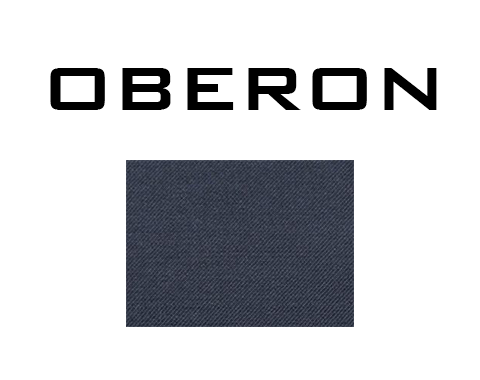
<style>
.page{position:relative;width:480px;height:380px;background:#ffffff}
.page>*{position:absolute;margin:0}
.t1{font:99.6px "BankGothicBT-Medium";color:#000000}
</style>
<div class="page">
<p class="t1" style="left:50px;top:68px;width:387px;height:42px">oberon</p>
</div>
